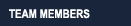
<style>
.page{position:relative;width:131px;height:26px;background:#19253a}
.page>*{position:absolute;margin:0}
.t1{font:12px "ArialNarrow-Bold";color:#ffffff}
</style>
<div class="page">
<p class="t1" style="left:9px;top:9px;width:81px;height:10px">TEAM MEMBERS</p>
</div>
